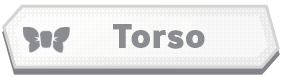
<style>
.page{position:relative;width:282px;height:78px}
.page>*{position:absolute;margin:0}
.t1{font:30.7px "RodinPro-UB";color:#8b8c92}
</style>
<div class="page">
<p class="t1" style="left:113px;top:24px;width:92px;height:25px">Torso</p>
</div>
